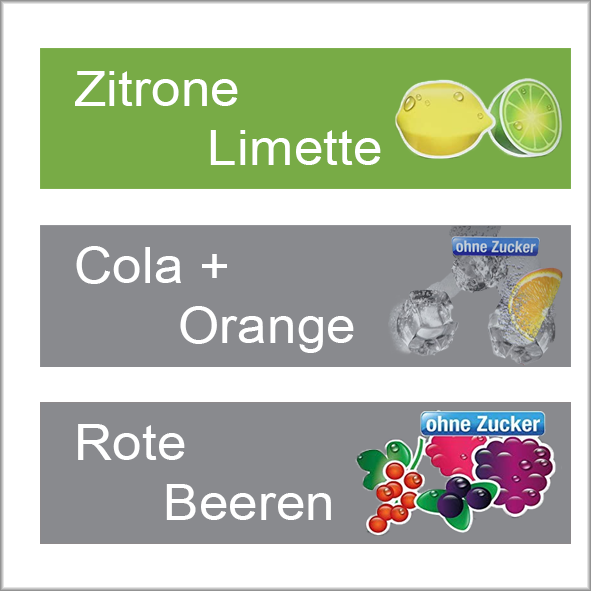
<style>
.page{position:relative;width:591px;height:591px;background:#ffffff}
.page>*{position:absolute;margin:0}
.t1{font:49.4px "ArialMT";color:#ffffff;scale:1.08 1}
.t2{font:49.5px "ArialMT";color:#ffffff;scale:1.08 1}
.t3{font:49.7px "ArialMT";color:#ffffff;scale:1.07 1}
</style>
<div class="page">
<p class="t1" style="left:75px;top:71px;width:306px;height:94px">Zitrone<br>         Limette</p>
<p class="t2" style="left:76px;top:246px;width:278px;height:107px">Cola +<br>       Orange</p>
<p class="t3" style="left:78px;top:424px;width:253px;height:96px">Rote<br>      Beeren</p>
</div>
